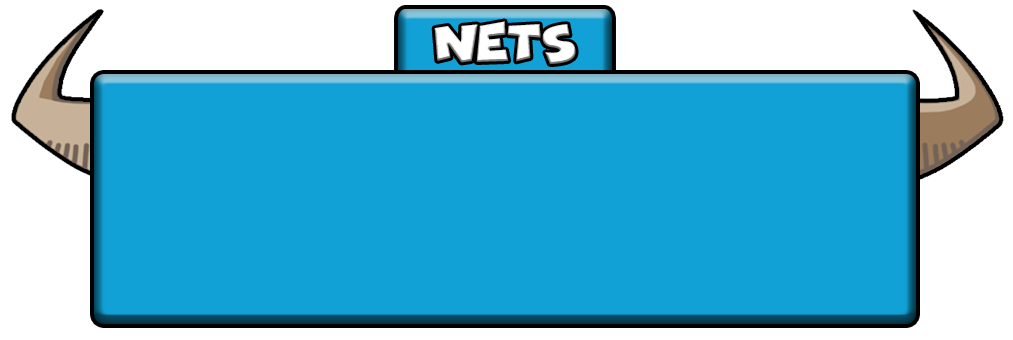
<style>
.page{position:relative;width:1013px;height:340px;background:#11a1d6}
.page>*{position:absolute;margin:0}
.t1{font:51.2px "Funhouse";color:#ffffff;scale:1.06 1}
</style>
<div class="page">
<p class="t1" style="left:434px;top:21px;width:142px;height:43px">NETS</p>
</div>
